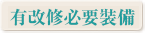
<style>
.page{position:relative;width:145px;height:33px;background:#efe7dc}
.page>*{position:absolute;margin:0}
.t1{font:18px "RyuminPr6N-ExBold";color:#229e9d}
</style>
<div class="page">
<p class="t1" style="left:10px;top:8px;width:125px;height:18px">有改修必要裝備</p>
</div>
